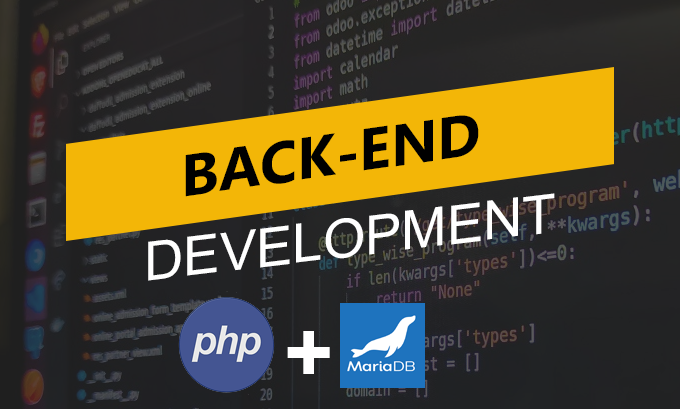
<style>
.page{position:relative;width:680px;height:409px}
.page>*{position:absolute;margin:0}
.t1{font:59px "MicrosoftNewTaiLue-Bold";color:#000000}
.t2{font:54px "ArialMT";color:#ffffff}
.t3{font:89px "Impact";color:#ffffff}
</style>
<div class="page">
<p class="t1" style="left:185px;top:115px;width:294px;height:82px;rotate:-8deg">BACK-END</p>
<p class="t2" style="left:148px;top:193px;width:407px;height:88px;rotate:-7deg">DEVELOPMENT</p>
<p class="t3" style="left:287px;top:331px;width:43px;height:43px">+</p>
</div>
